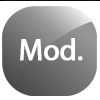
<style>
.page{position:relative;width:100px;height:100px;background:#ffffff}
.page>*{position:absolute;margin:0}
.t1{font:30px "MyriadPro-Regular";letter-spacing:-0.005em;color:#ffffff;font-weight:bold}
</style>
<div class="page">
<p class="t1" style="left:20px;top:37px;width:63px;height:23px">Mod.</p>
</div>
